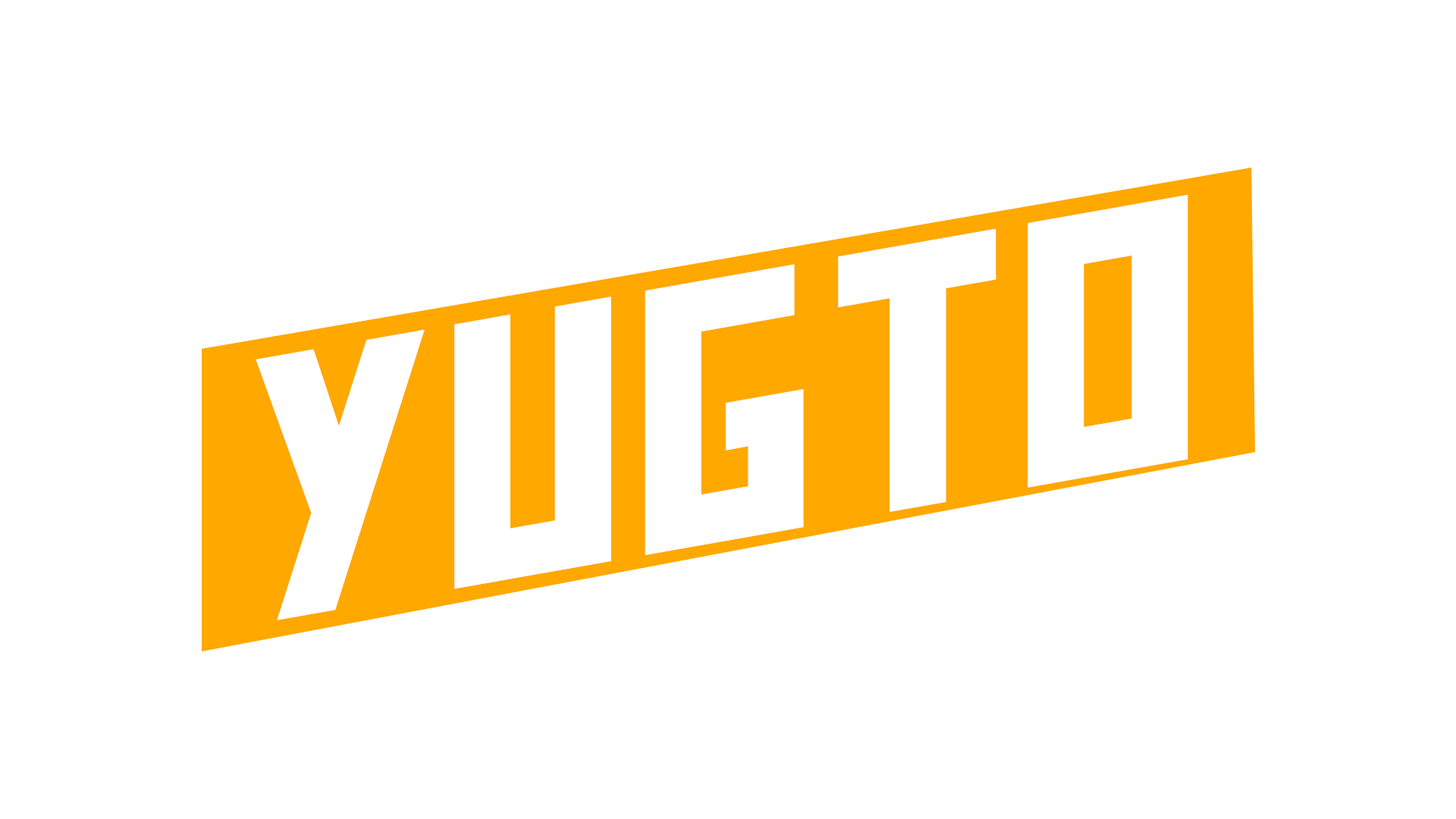
<style>
.page{position:relative;width:1456px;height:819px;background:#ffffff}
.page>*{position:absolute;margin:0}
.t1{font:373.6px "AldotheApache";color:#ffffff;font-weight:bold}
</style>
<div class="page">
<p class="t1" style="left:256px;top:195px;width:932px;height:425px;rotate:-10deg">YUGTO</p>
</div>
